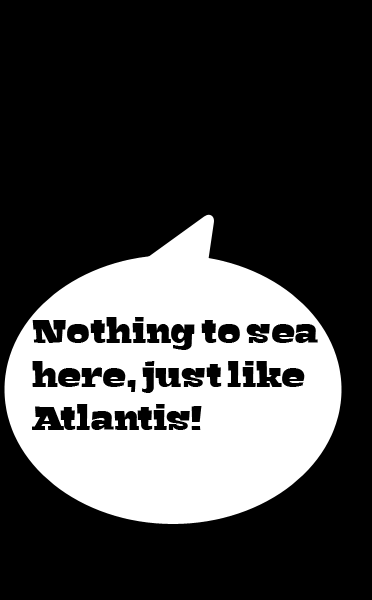
<style>
.page{position:relative;width:372px;height:600px;background:#000000}
.page>*{position:absolute;margin:0}
.t1{font:36px "Bigfish-Black";color:#000000}
</style>
<div class="page">
<p class="t1" style="left:32px;top:317px;width:286px;height:113px">Nothing to sea here, just like Atlantis!</p>
</div>
